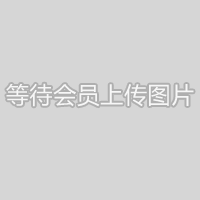
<style>
.page{position:relative;width:200px;height:200px;background:#d6d6d6}
.page>*{position:absolute;margin:0}
.t1{font:23px "MicrosoftYaHei";letter-spacing:0.025em;color:#ffffff}
</style>
<div class="page">
<p class="t1" style="left:6px;top:83px;width:188px;height:24px;opacity:0.8">等待会员上传图片</p>
</div>
